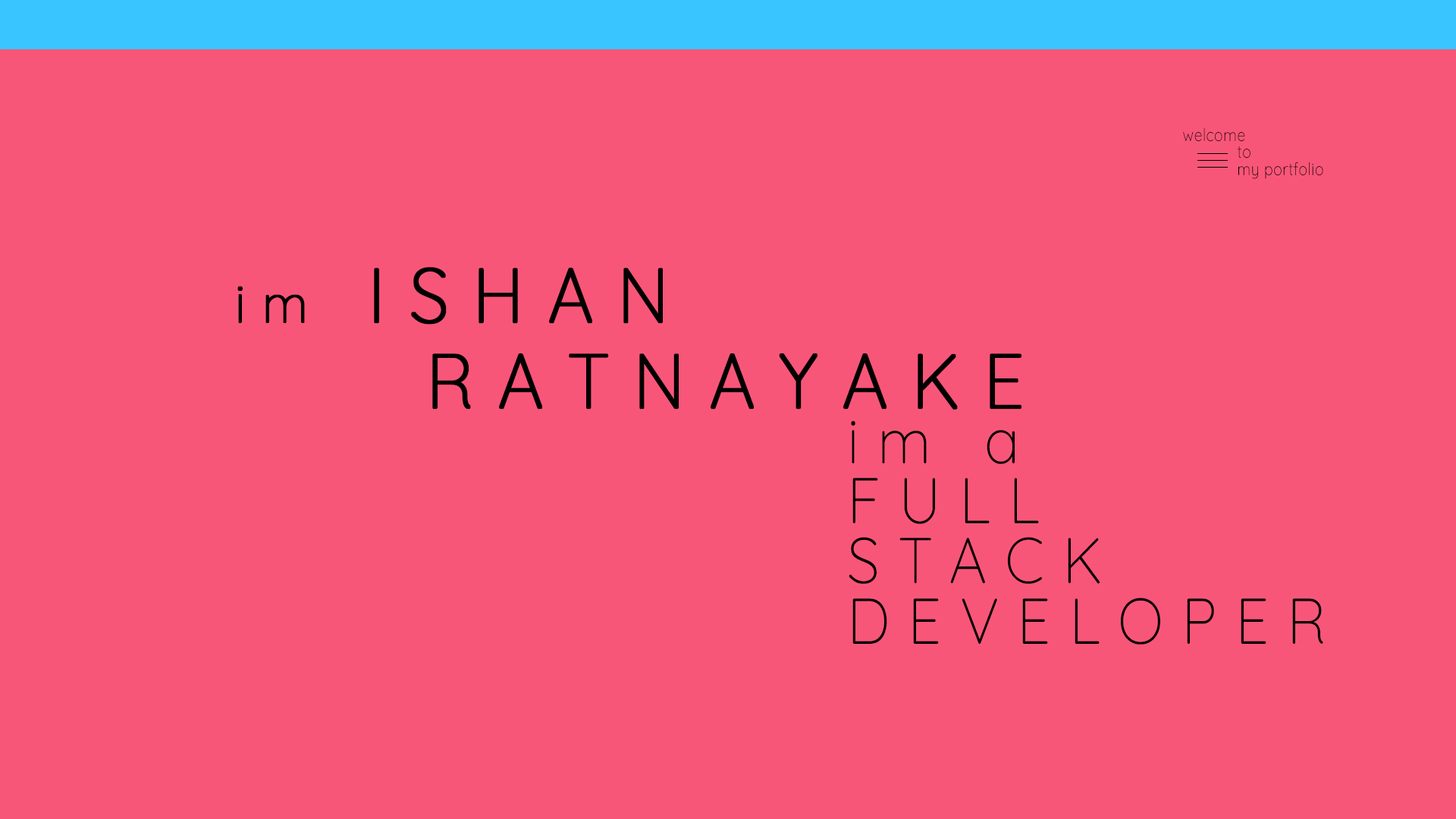
<style>
.page{position:relative;width:1456px;height:819px;background:#f85678}
.page>*{position:absolute;margin:0}
.t1{font:17.5px/17.2px "Quicksand-Light";letter-spacing:0.03em;color:#000000;scale:0.84 1}
.t2{font:77.5px/28.6px "Quicksand-Light";letter-spacing:0.31em;color:#000000;font-weight:bold;scale:0.92 1}
.t3{font:54.9px/28.6px "Quicksand-Light";letter-spacing:0.31em;color:#000000;font-weight:bold;scale:0.92 1}
.t4{font:64.6px/30.1px "Quicksand-Light";letter-spacing:0.31em;color:#000000;scale:0.92 1}
</style>
<div class="page">
<p class="t1" style="left:1183px;top:128px;width:140px;height:51px">welcome <br>  to <br>  my portfolio</p>
<p class="t2" style="left:237px;top:267px;width:784px;height:142px"><span class="t3"><br>  im</span> ISHAN <br>       <br>         <br>         RATNAYAKE</p>
<p class="t4" style="left:849px;top:421px;width:474px;height:224px">im a <br><br>FULL <br><br>STACK <br><br>DEVELOPER</p>
</div>
